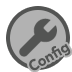
<style>
.page{position:relative;width:72px;height:72px;background:#ffffff}
.page>*{position:absolute;margin:0}
.t1{font:15px "MikadoMedium";color:#535453}
</style>
<div class="page">
<p class="t1" style="left:29px;top:43px;width:42px;height:28px;rotate:-30deg">Config</p>
</div>
